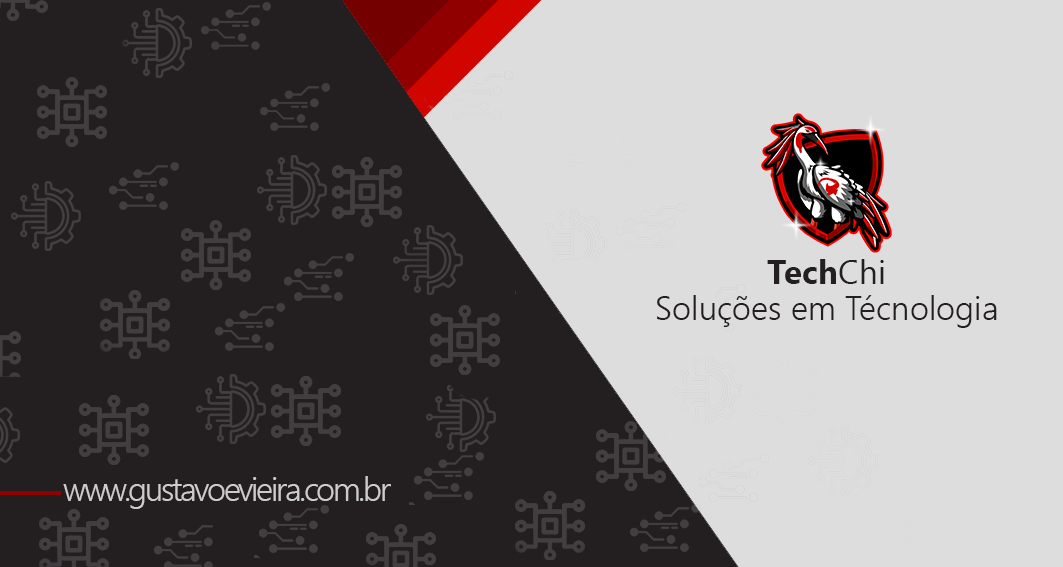
<style>
.page{position:relative;width:1063px;height:567px;background:#231e1f}
.page>*{position:absolute;margin:0}
.t1{font:33.3px "SegoeUI-Bold";color:#231e1f}
.t2{font:33.3px "SegoeUI";color:#231e1f}
.t3{font:33.3px "SegoeUI-Semilight";color:#231e1f}
.t4{font:33.3px "SegoeUI-Semilight";letter-spacing:-0.075em;color:#cccccc}
</style>
<div class="page">
<p class="t1" style="left:767px;top:259px;width:117px;height:25px">Tech<span class="t2">Chi</span></p>
<p class="t3" style="left:657px;top:295px;width:340px;height:33px">Soluções em Técnologia</p>
<p class="t4" style="left:63px;top:476px;width:328px;height:33px">www.gustavoevieira.com.br</p>
</div>
